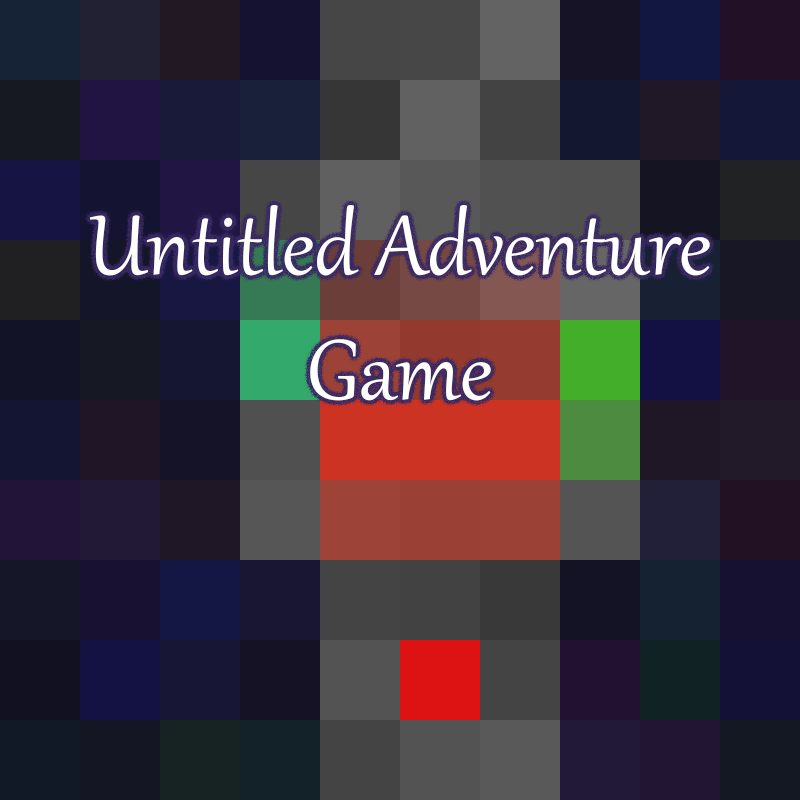
<style>
.page{position:relative;width:800px;height:800px}
.page>*{position:absolute;margin:0}
.t1{font:104.2px "Gabriola";color:#ffffff}
</style>
<div class="page">
<p class="t1" style="left:89px;top:205px;width:621px;height:196px;text-align:center">Untitled Adventure<br>Game</p>
</div>
